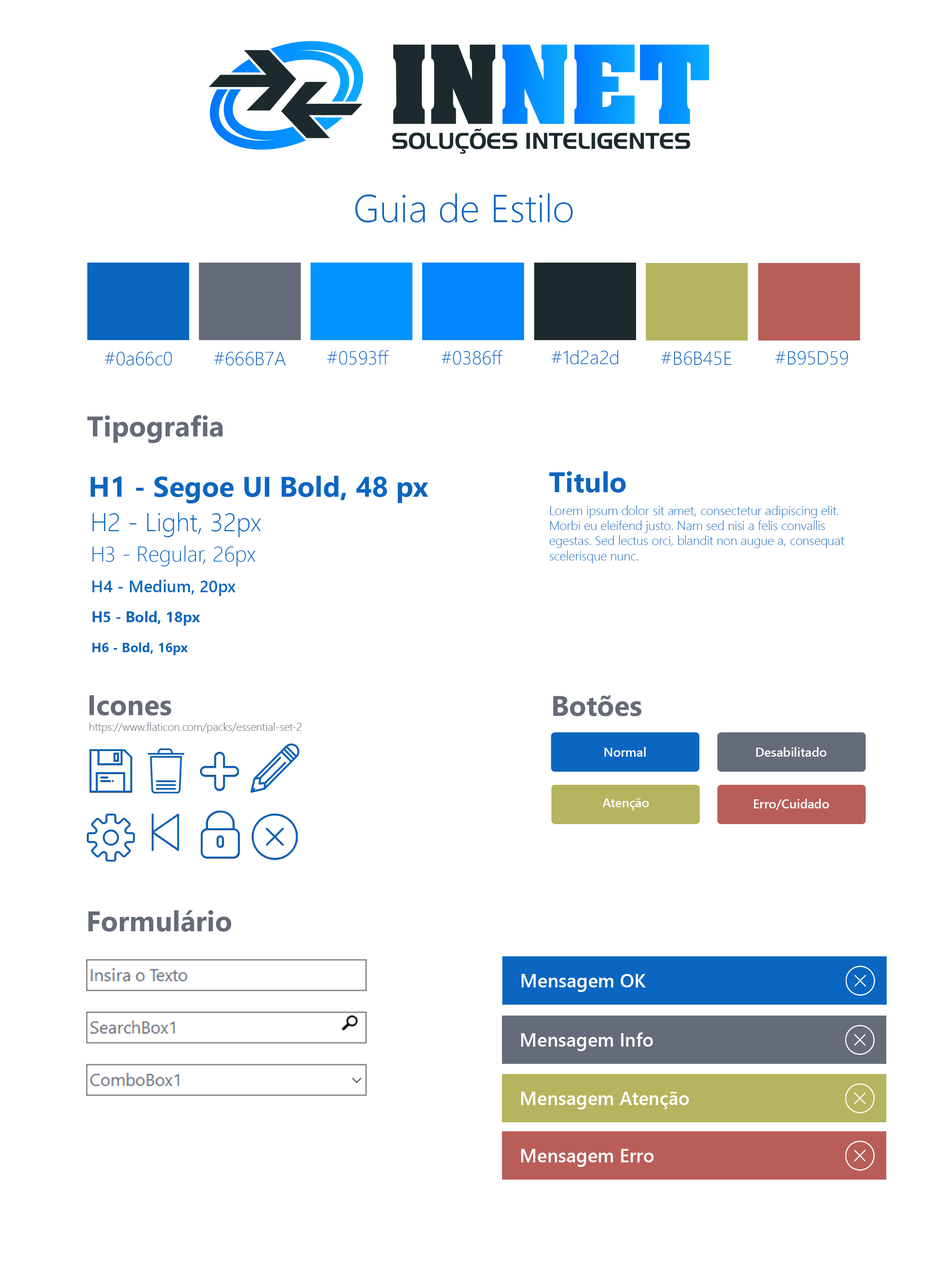
<style>
.page{position:relative;width:929px;height:1283px;background:#ffffff}
.page>*{position:absolute;margin:0}
.t1{font:39px "SegoeUI-Light";color:#0a66c0}
.t2{font:19.1px "SegoeUI-Light";color:#0a66c0}
.t3{font:28.2px "SegoeUI-Bold";color:#666b7a}
.t4{font:28.2px "SegoeUI-Bold";color:#0a66c0}
.t5{font:12.6px "SegoeUI-Light";color:#0a66c0}
.t6{font:25.6px "SegoeUI-Light";color:#0a66c0}
.t7{font:21.5px "SegoeUI-Light";color:#0a66c0}
.t8{font:16.5px "SegoeUI-Semibold";color:#0a66c0}
.t9{font:14.9px "SegoeUI-Bold";color:#0a66c0}
.t10{font:13.2px "SegoeUI-Bold";color:#0a66c0}
.t11{font:11.1px "SegoeUI-Light";color:#666b7a}
.t12{font:12.6px "SegoeUI-Semibold";color:#fefefe}
.t13{font:18.9px "SegoeUI-Semibold";color:#ffffff}
</style>
<div class="page">
<p class="t1" style="left:355px;top:193px;width:218px;height:30px">Guia de Estilo</p>
<p class="t2" style="left:105px;top:351px;width:67px;height:15px">#0a66c0</p>
<p class="t2" style="left:214px;top:351px;width:72px;height:15px">#666B7A</p>
<p class="t2" style="left:327px;top:350px;width:62px;height:15px">#0593ff</p>
<p class="t2" style="left:441px;top:350px;width:62px;height:15px">#0386ff</p>
<p class="t2" style="left:552px;top:350px;width:67px;height:15px">#1d2a2d</p>
<p class="t2" style="left:661px;top:351px;width:70px;height:14px">#B6B45E</p>
<p class="t2" style="left:775px;top:351px;width:73px;height:14px">#B95D59</p>
<p class="t3" style="left:87px;top:415px;width:136px;height:28px">Tipografia</p>
<p class="t4" style="left:549px;top:471px;width:77px;height:22px">Titulo</p>
<p class="t4" style="left:91px;top:476px;width:337px;height:28px">H1 - Segoe UI Bold, 48 px</p>
<p class="t5" style="left:550px;top:505px;width:295px;height:59px">Lorem ipsum dolor sit amet, consectetur adipiscing elit. Morbi eu eleifend justo. Nam sed nisi a felis convallis egestas. Sed lectus orci, blandit non augue a, consequat scelerisque nunc.</p>
<p class="t6" style="left:93px;top:513px;width:168px;height:24px">H2 - Light, 32px</p>
<p class="t7" style="left:93px;top:546px;width:163px;height:21px">H3 - Regular, 26px</p>
<p class="t8" style="left:92px;top:580px;width:144px;height:16px">H4 - Medium, 20px</p>
<p class="t9" style="left:93px;top:611px;width:107px;height:15px">H5 - Bold, 18px</p>
<p class="t10" style="left:92px;top:643px;width:96px;height:12px">H6 - Bold, 16px</p>
<p class="t3" style="left:90px;top:695px;width:82px;height:21px">Icones</p>
<p class="t3" style="left:553px;top:695px;width:89px;height:21px">Botões</p>
<p class="t11" style="left:90px;top:722px;width:212px;height:12px">https://www.flaticon.com/packs/essential-set-2</p>
<p class="t12" style="left:604px;top:747px;width:42px;height:10px">Normal</p>
<p class="t12" style="left:756px;top:747px;width:71px;height:10px">Desabilitado</p>
<p class="t12" style="left:602px;top:798px;width:47px;height:12px">Atenção</p>
<p class="t12" style="left:754px;top:799px;width:75px;height:11px">Erro/Cuidado</p>
<p class="t3" style="left:88px;top:910px;width:144px;height:22px">Formulário</p>
<p class="t13" style="left:522px;top:974px;width:124px;height:18px">Mensagem OK</p>
<p class="t13" style="left:521px;top:1033px;width:132px;height:18px">Mensagem Info</p>
<p class="t13" style="left:521px;top:1092px;width:168px;height:18px">Mensagem Atenção</p>
<p class="t13" style="left:521px;top:1149px;width:133px;height:18px">Mensagem Erro</p>
</div>
